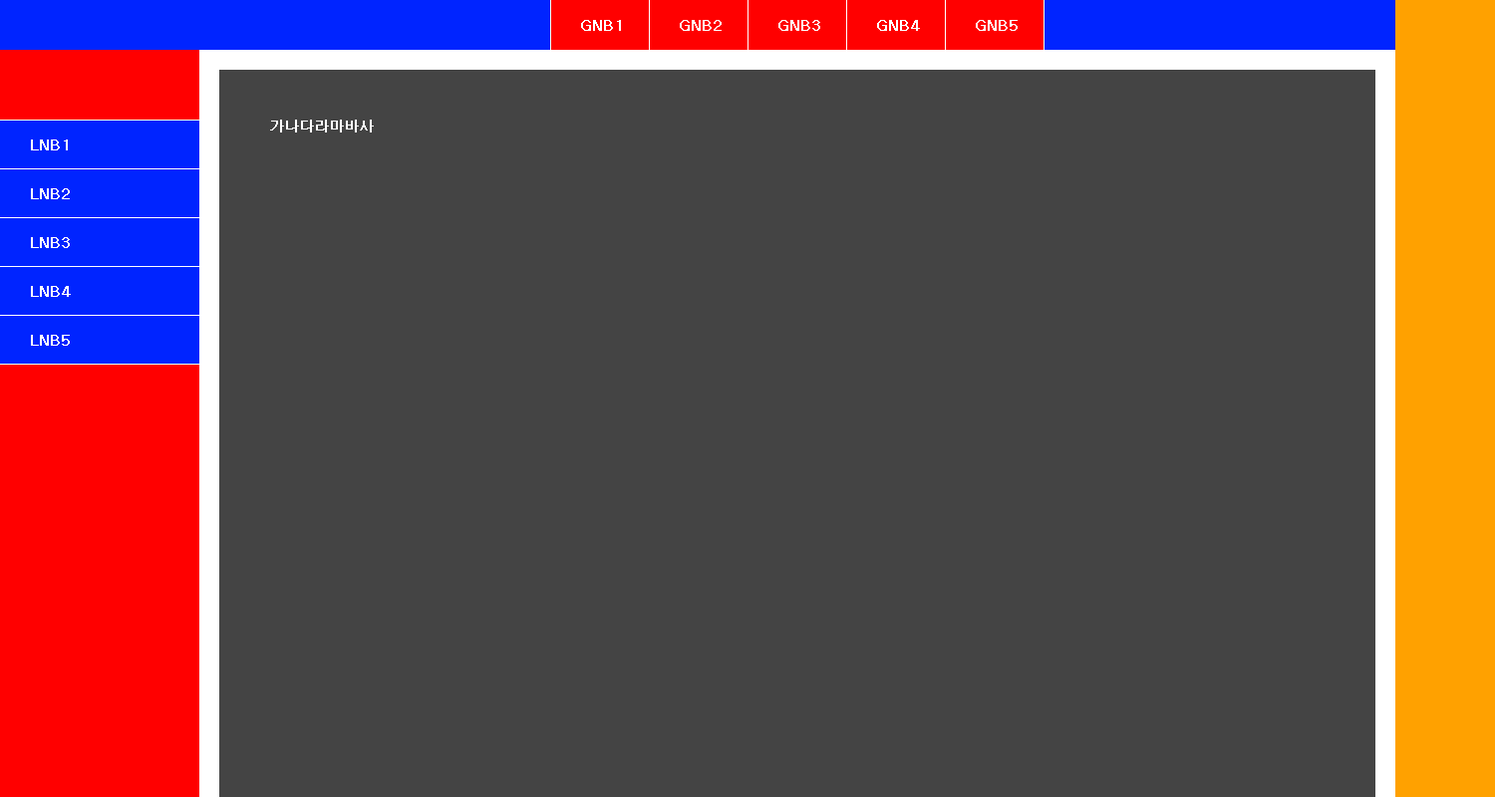
<style>
.page{position:relative;width:1495px;height:797px;background:#444444}
.page>*{position:absolute;margin:0}
.t1{font:14px "Dotum";color:#ffffff;font-weight:bold}
</style>
<div class="page">
<p class="t1" style="left:581px;top:20px;width:40px;height:11px">GNB1</p>
<p class="t1" style="left:680px;top:20px;width:42px;height:11px">GNB2</p>
<p class="t1" style="left:779px;top:20px;width:41px;height:11px">GNB3</p>
<p class="t1" style="left:877px;top:20px;width:43px;height:11px">GNB4</p>
<p class="t1" style="left:976px;top:20px;width:42px;height:11px">GNB5</p>
<p class="t1" style="left:270px;top:120px;width:104px;height:13px">가나다라마바사</p>
<p class="t1" style="left:31px;top:140px;width:37px;height:11px">LNB1</p>
<p class="t1" style="left:31px;top:188px;width:39px;height:11px">LNB2</p>
<p class="t1" style="left:31px;top:237px;width:39px;height:11px">LNB3</p>
<p class="t1" style="left:31px;top:286px;width:40px;height:11px">LNB4</p>
<p class="t1" style="left:31px;top:335px;width:39px;height:11px">LNB5</p>
</div>
